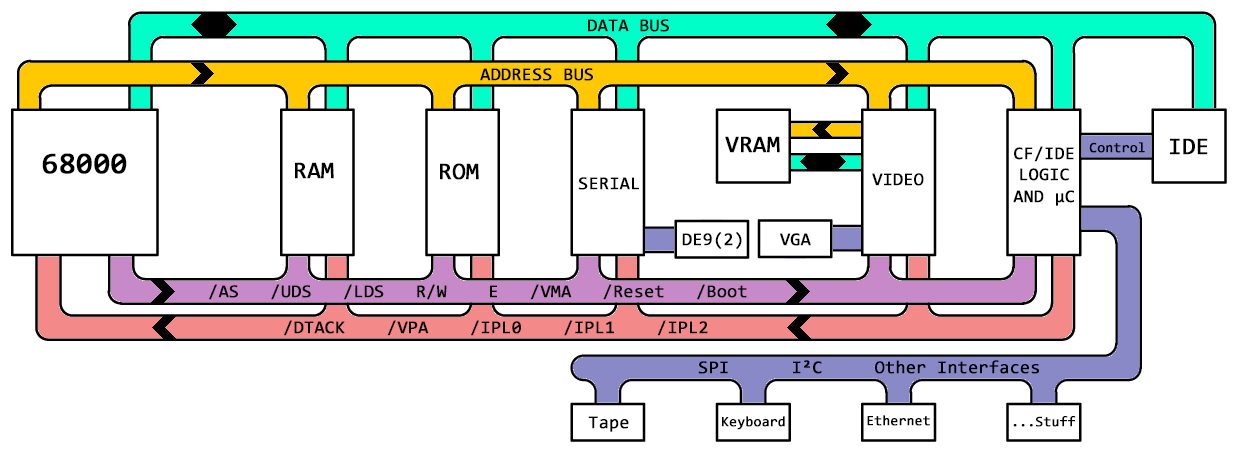
<style>
.page{position:relative;width:1240px;height:454px;background:#ffffff}
.page>*{position:absolute;margin:0}
.t1{font:18px "Consolas";color:#000000;font-weight:bold}
.t2{font:24px "Consolas";color:#000000;font-weight:bold}
.t3{font:17.9px "Consolas";color:#000000;font-weight:bold}
.t4{font:14px "Consolas";color:#000000;font-weight:bold}
.t5{font:30px "Consolas";color:#000000;font-weight:bold}
</style>
<div class="page">
<p class="t1" style="left:588px;top:19px;width:81px;height:13px">DATA BUS</p>
<p class="t1" style="left:480px;top:68px;width:113px;height:13px">ADDRESS BUS</p>
<p class="t2" style="left:725px;top:136px;width:55px;height:17px">VRAM</p>
<p class="t3" style="left:1013px;top:146px;width:61px;height:60px;text-align:center">CF/IDE<br>LOGIC<br>AND μC</p>
<p class="t4" style="left:1089px;top:142px;width:56px;height:11px">Control</p>
<p class="t2" style="left:1170px;top:138px;width:38px;height:17px">IDE</p>
<p class="t5" style="left:42px;top:153px;width:85px;height:21px">68000</p>
<p class="t2" style="left:295px;top:162px;width:39px;height:17px">RAM</p>
<p class="t2" style="left:440px;top:163px;width:39px;height:17px">ROM</p>
<p class="t1" style="left:872px;top:173px;width:52px;height:13px">VIDEO</p>
<p class="t1" style="left:578px;top:177px;width:61px;height:13px">SERIAL</p>
<p class="t1" style="left:682px;top:232px;width:60px;height:17px">DE9(2)</p>
<p class="t1" style="left:780px;top:233px;width:31px;height:13px">VGA</p>
<p class="t1" style="left:209px;top:284px;width:538px;height:16px">/AS   /UDS   /LDS   R/W    E   /VMA   /Reset   /Boot</p>
<p class="t1" style="left:284px;top:320px;width:424px;height:16px">/DTACK    /VPA    /IPL0    /IPL1    /IPL2</p>
<p class="t1" style="left:698px;top:360px;width:341px;height:14px">SPI      I²C     Other Interfaces</p>
<p class="t1" style="left:588px;top:416px;width:41px;height:16px">Tape</p>
<p class="t4" style="left:722px;top:416px;width:63px;height:14px">Keyboard</p>
<p class="t4" style="left:867px;top:415px;width:63px;height:11px">Ethernet</p>
<p class="t4" style="left:1013px;top:416px;width:63px;height:11px">...Stuff</p>
</div>
